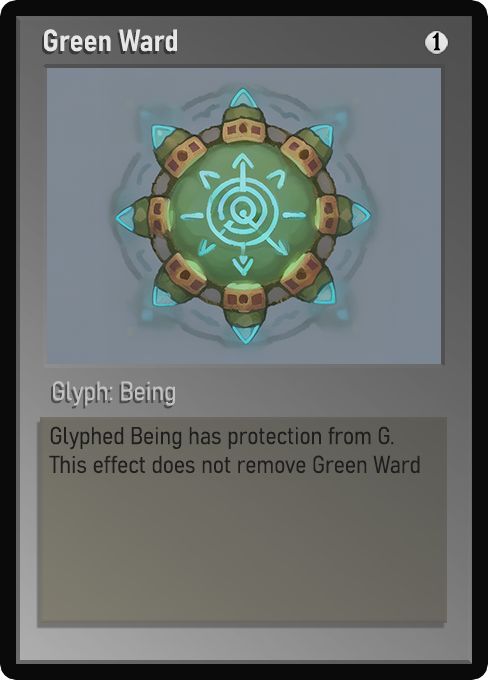
<style>
.page{position:relative;width:488px;height:680px}
.page>*{position:absolute;margin:0}
.t1{font:30px "Bahnschrift-SemiBoldSemiCondensed";color:#f2f2f2;font-weight:bold}
.t2{font:25px "WTRRoycroft";color:#000000;font-weight:bold;scale:1.09 1}
.t3{font:26px "Bahnschrift-LightSemiCondensed";color:#c8c8c8;font-weight:bold}
.t4{font:24px "Bahnschrift-LightSemiCondensed";color:#1e1e1e;font-weight:bold}
</style>
<div class="page">
<p class="t1" style="left:44px;top:29px;width:133px;height:23px;opacity:0.9">Green Ward</p>
<p class="t2" style="left:432px;top:32px;width:9px;height:19px">1</p>
<p class="t3" style="left:53px;top:381px;width:122px;height:25px;opacity:0.9">Glyph: Being</p>
<p class="t4" style="left:49px;top:426px;width:371px;height:48px">Glyphed Being has protection from G. This effect does not remove Green Ward</p>
</div>
